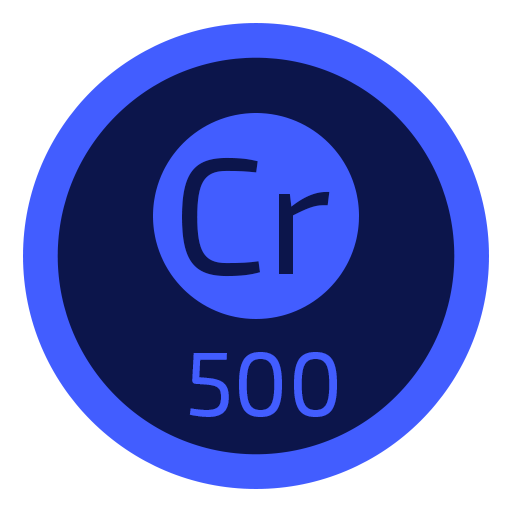
<style>
.page{position:relative;width:512px;height:512px;background:#ffffff}
.page>*{position:absolute;margin:0}
.t1{font:165.1px "Exo2-Regular";color:#0c154b}
.t2{font:90.9px "Exo2-Regular";color:#425dff}
</style>
<div class="page">
<p class="t1" style="left:182px;top:157px;width:148px;height:120px">Cr</p>
<p class="t2" style="left:189px;top:352px;width:148px;height:65px">500</p>
</div>
